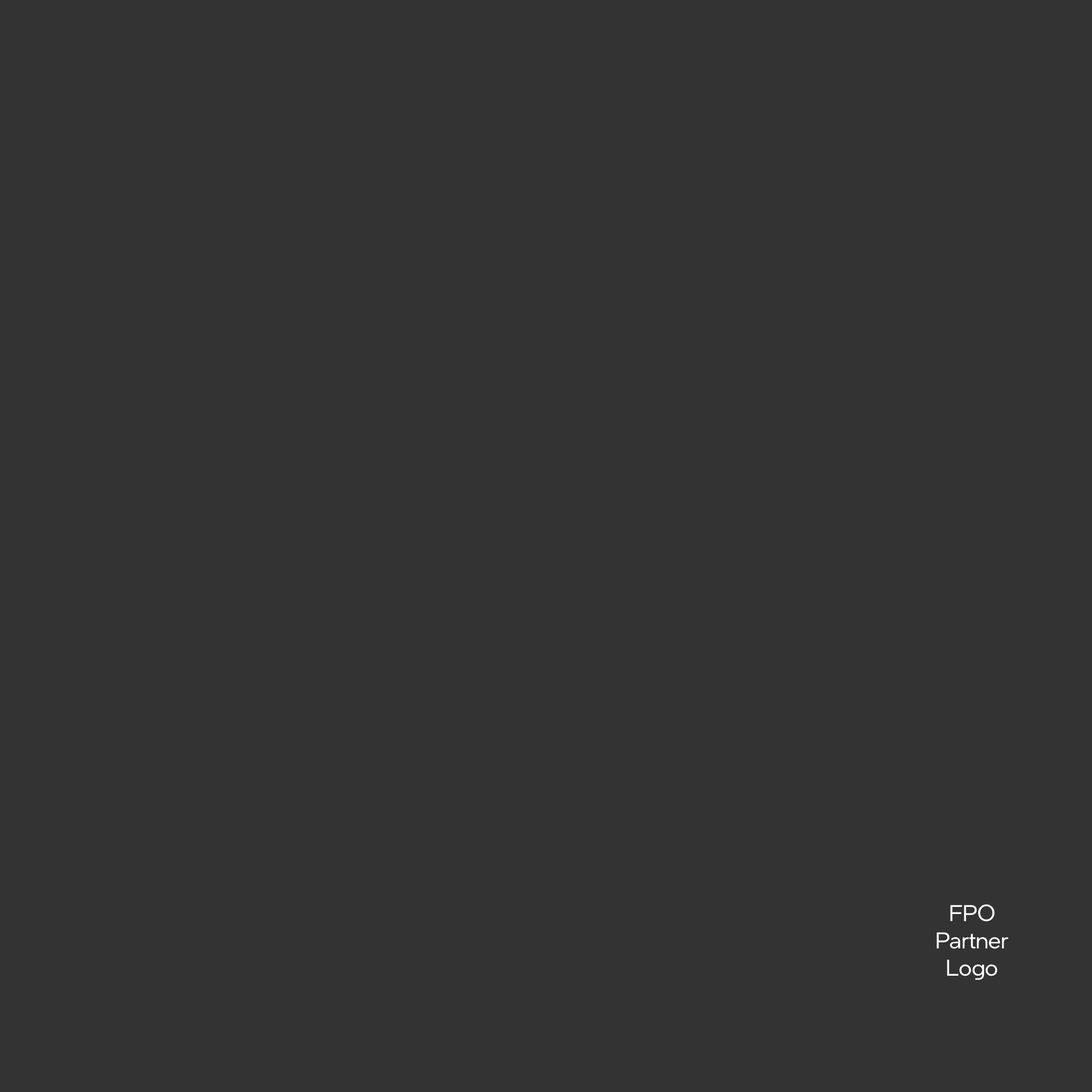
<style>
.page{position:relative;width:1092px;height:1092px;background:#333333}
.page>*{position:absolute;margin:0}
.t1{font:22.8px "IntelOneDisplay-Regular";color:#ffffff}
</style>
<div class="page">
<p class="t1" style="left:936px;top:904px;width:72px;height:76px;text-align:center">FPO Partner Logo</p>
</div>
